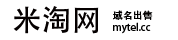
<style>
.page{position:relative;width:178px;height:40px;background:#ffffff}
.page>*{position:absolute;margin:0}
.t1{font:30px "AdobeHeitiStd-Regular";color:#050000}
.t2{font:10px "AdobeHeitiStd-Regular";color:#020000}
.t3{font:10px "AdobeHeitiStd-Regular";color:#010000}
</style>
<div class="page">
<p class="t1" style="left:13px;top:6px;width:86px;height:28px">米淘网</p>
<p class="t2" style="left:113px;top:10px;width:40px;height:10px">域名出售</p>
<p class="t3" style="left:113px;top:22px;width:38px;height:12px">mytel.cc</p>
</div>
